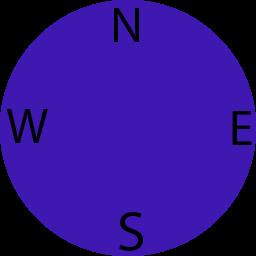
<style>
.page{position:relative;width:256px;height:256px;background:#3f17b1}
.page>*{position:absolute;margin:0}
.t1{font:50px "MyriadPro-Regular";color:#000000}
.t2{font:57px "MyriadPro-Regular";color:#000000}
</style>
<div class="page">
<p class="t1" style="left:114px;top:8px;width:25px;height:34px">N</p>
<p class="t1" style="left:6px;top:109px;width:42px;height:34px">W</p>
<p class="t1" style="left:232px;top:111px;width:20px;height:34px">EEEEE</p>
<p class="t2" style="left:119px;top:212px;width:24px;height:39px">S</p>
</div>
